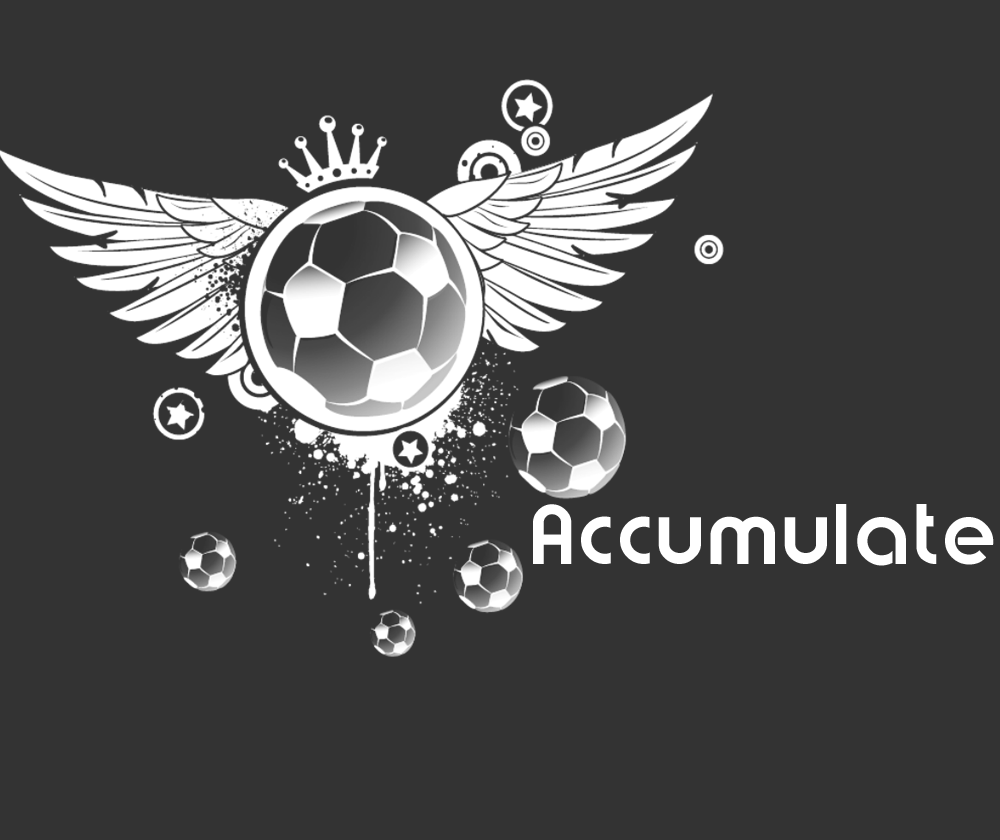
<style>
.page{position:relative;width:1000px;height:840px;background:#333333}
.page>*{position:absolute;margin:0}
.t1{font:72px "Brandish";letter-spacing:0.05em;color:#ffffff}
</style>
<div class="page">
<p class="t1" style="left:533px;top:504px;width:461px;height:62px">Accumulate</p>
</div>
